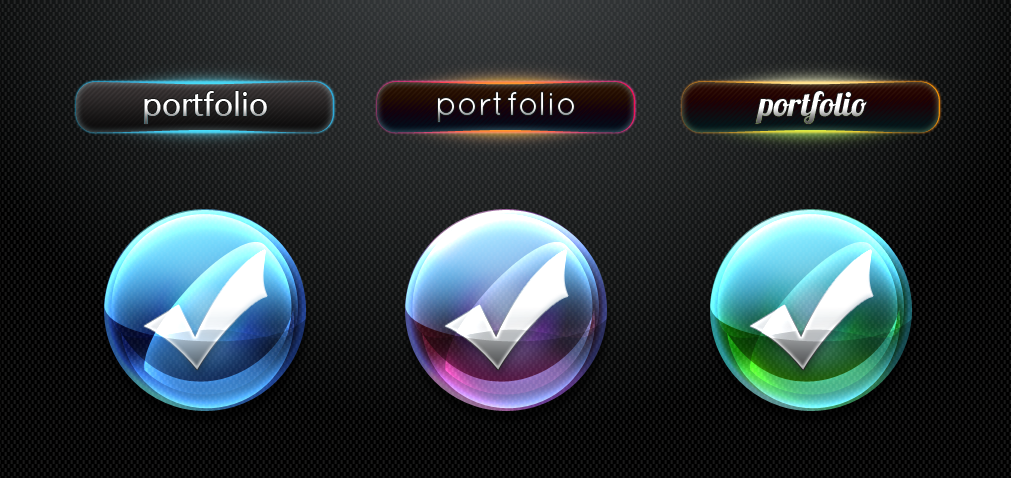
<style>
.page{position:relative;width:1011px;height:478px}
.page>*{position:absolute;margin:0}
.t1{font:33.3px "Sapir";color:#ffffff}
.t2{font:33.3px "QuicksandBook-Regular";color:#ffffff}
.t3{font:33.3px "Lobster1.1";color:#ffffff}
</style>
<div class="page">
<p class="t1" style="left:144px;top:91px;width:123px;height:33px">portfolio</p>
<p class="t2" style="left:438px;top:92px;width:136px;height:30px">portfolio</p>
<p class="t3" style="left:755px;top:91px;width:112px;height:33px">portfolio</p>
</div>
